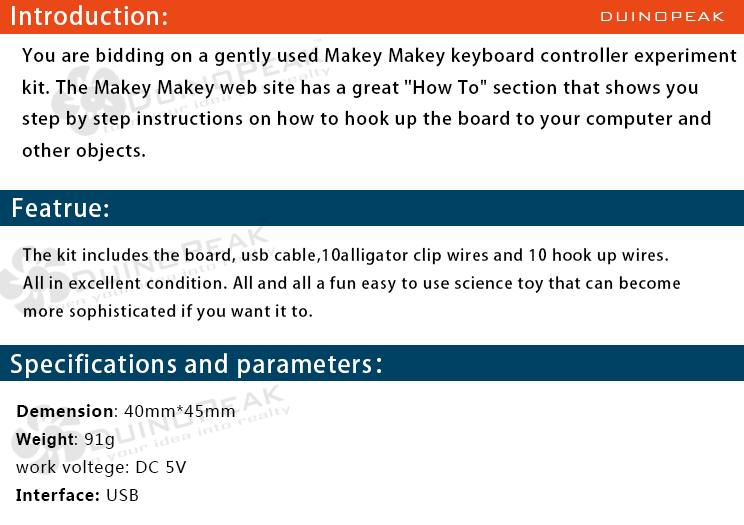
<style>
.page{position:relative;width:744px;height:525px;background:#ffffff}
.page>*{position:absolute;margin:0}
.t1{font:24px "AdobeHeitiStd-Regular";letter-spacing:0.05em;color:#ffffff}
.t2{font:18px "BankGothicBT-Light";letter-spacing:0.05em;color:#ffffff}
.t3{font:18px "AdobeHeitiStd-Regular";letter-spacing:0.05em;color:#000000}
.t4{font:16px "AdobeHeitiStd-Regular";letter-spacing:0.05em;color:#000000}
.t5{font:16px "MicrosoftYaHei";letter-spacing:0.05em;color:#000000}
.t6{font:16px "MicrosoftYaHei-Bold";letter-spacing:0.05em;color:#000000}
.t7{font:16px "Arial-BoldMT";letter-spacing:0.05em;color:#000000}
</style>
<div class="page">
<p class="t1" style="left:12px;top:5px;width:155px;height:20px">Introduction:</p>
<p class="t2" style="left:601px;top:12px;width:124px;height:9px">DUINOPEAK</p>
<p class="t3" style="left:22px;top:47px;width:715px;height:115px">You are bidding on a gently used Makey Makey keyboard controller experiment <br>kit. The Makey Makey web site has a great "How To" section that shows you <br>step by step instructions on how to hook up the board to your computer and <br>other objects.</p>
<p class="t1" style="left:13px;top:198px;width:95px;height:19px">Featrue:</p>
<p class="t4" style="left:22px;top:247px;width:658px;height:74px">The kit includes the board, usb cable,10alligator clip wires and 10 hook up wires. <br>All in excellent condition. All and all a fun easy to use science toy that can become <br>more sophisticated if you want it to.</p>
<p class="t1" style="left:11px;top:353px;width:370px;height:25px">Specifications and parameters：</p>
<p class="t5" style="left:16px;top:404px;width:219px;height:97px"><span class="t6">Demension</span>: 40mm*45mm<br><span class="t7">Weight</span>: 91g<br>work voltege: DC 5V <br><span class="t6">Interface: </span>USB</p>
</div>
